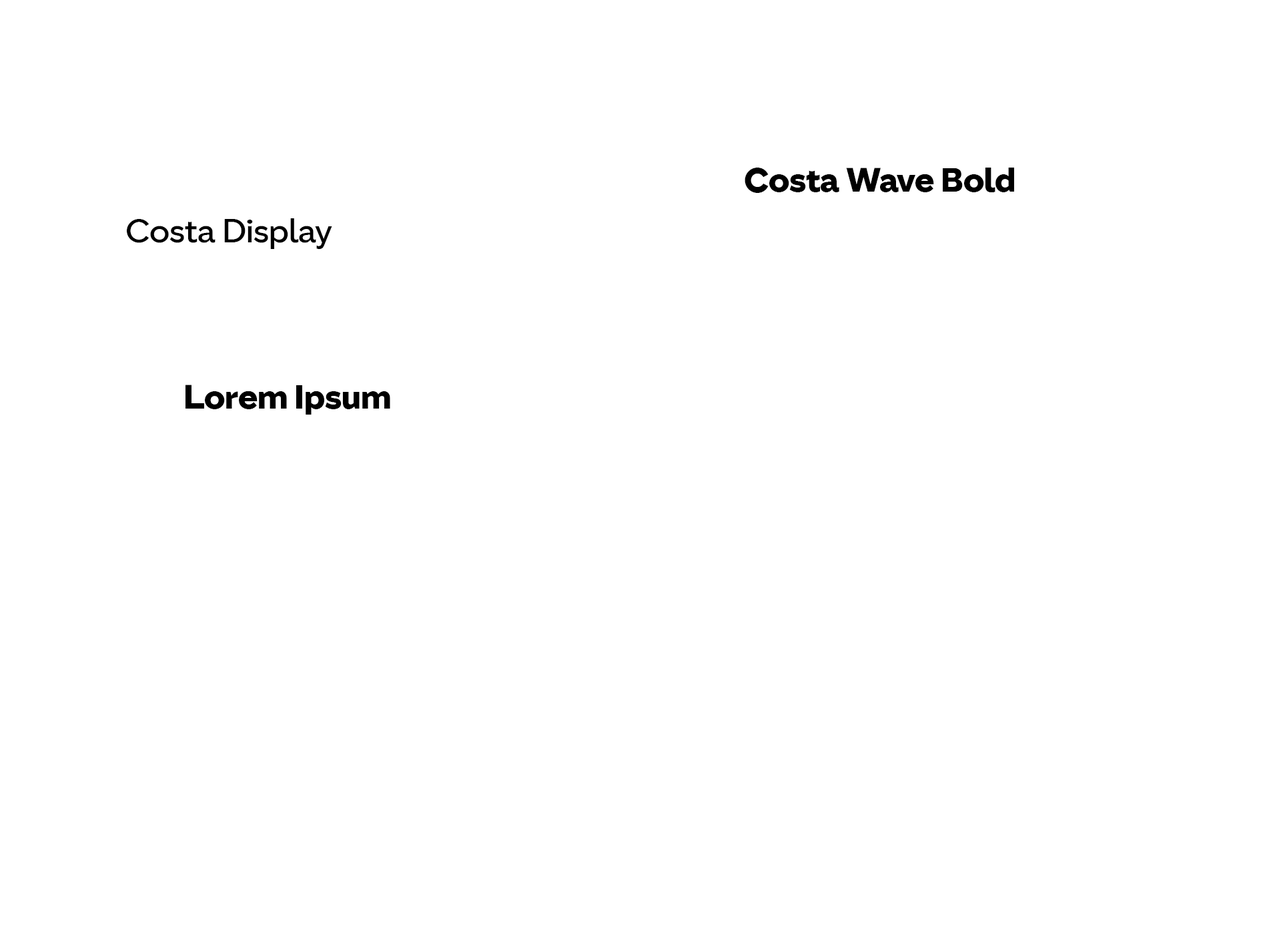
<style>
.page{position:relative;width:1261px;height:946px;background:#ffffff}
.page>*{position:absolute;margin:0}
.t1{font:33.4px "CostaDisplay-WaveBold";color:#000000}
.t2{font:33.4px "CostaDisplay-Regular";color:#000000}
.t3{font:33.4px "CostaDisplay-Bold";color:#000000}
</style>
<div class="page">
<p class="t1" style="left:745px;top:167px;width:269px;height:26px">Costa Wave Bold</p>
<p class="t2" style="left:127px;top:218px;width:205px;height:31px">Costa Display</p>
<p class="t3" style="left:186px;top:384px;width:204px;height:30px">Lorem Ipsum</p>
</div>
